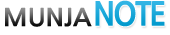
<style>
.page{position:relative;width:170px;height:35px;background:#ffffff}
.page>*{position:absolute;margin:0}
.t1{font:32px "NanumGothicExtraBold";letter-spacing:-0.07em;scale:0.95 1}
.t2{font:24px "NanumGothicExtraBold";scale:1.05 1}
</style>
<div class="page">
<p class="t1" style="left:95px;top:0px;width:70px;height:27px">NOTE</p>
<p class="t2" style="left:5px;top:7px;width:87px;height:20px">MUNJA</p>
</div>
